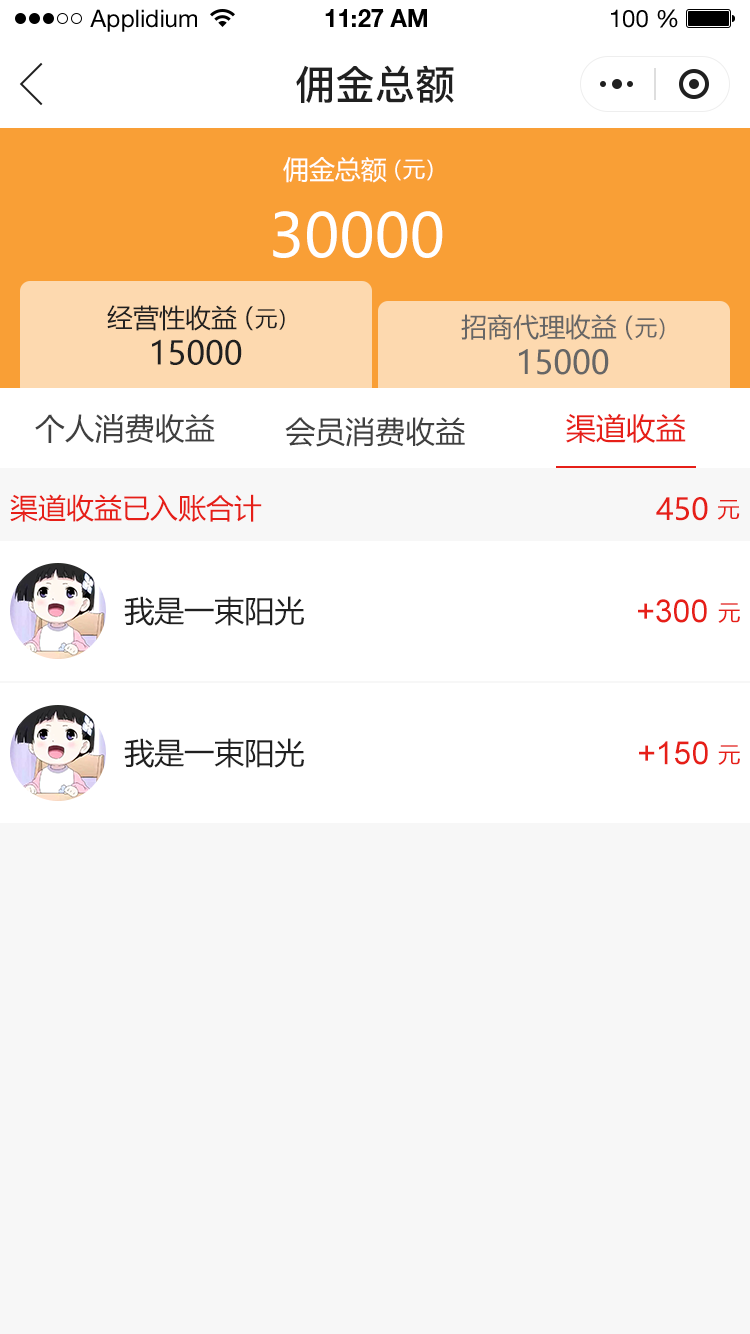
<style>
.page{position:relative;width:750px;height:1334px;background:#f7f7f7}
.page>*{position:absolute;margin:0}
.t1{font:24px "HelveticaNeueLTStd-Roman";color:#000000}
.t2{font:24px "HelveticaNeueLTStd-Bd";color:#000000}
.t3{font:40px "PingFang-SC-Bold";color:#202020;text-transform:uppercase}
.t4{font:26px "MicrosoftYaHei";color:#ffffff;text-transform:uppercase}
.t5{font:22px "MicrosoftYaHei";color:#ffffff;text-transform:uppercase}
.t6{font:60px "MicrosoftYaHei";color:#ffffff;text-transform:uppercase}
.t7{font:26px "MicrosoftYaHei";color:#202020;text-transform:uppercase}
.t8{font:22px "MicrosoftYaHei";color:#202020;text-transform:uppercase}
.t9{font:26.2px "MicrosoftYaHei";color:#666666;text-transform:uppercase}
.t10{font:22.2px "MicrosoftYaHei";color:#666666;text-transform:uppercase}
.t11{font:32px "MicrosoftYaHei";color:#202020;text-transform:uppercase}
.t12{font:32.2px "MicrosoftYaHei";color:#666666;text-transform:uppercase}
.t13{font:30px "MicrosoftYaHei";color:#404040;text-transform:uppercase}
.t14{font:30px "MicrosoftYaHei";color:#e61f18;text-transform:uppercase}
.t15{font:28px "MicrosoftYaHei";color:#e61f18;text-transform:uppercase}
.t16{font:22px "MicrosoftYaHei";color:#e61f18;text-transform:uppercase}
.t17{font:30px "MicrosoftYaHei";color:#202020;text-transform:uppercase}
.t18{font:32px "ArialMT";color:#e61f18;text-transform:uppercase}
</style>
<div class="page">
<p class="t1" style="left:90px;top:9px;width:107px;height:23px">Applidium</p>
<p class="t2" style="left:325px;top:9px;width:102px;height:18px">11:27 AM</p>
<p class="t1" style="left:611px;top:9px;width:67px;height:19px">100 %</p>
<p class="t3" style="left:296px;top:65px;width:158px;height:38px">佣金总额</p>
<p class="t4" style="left:283px;top:157px;width:104px;height:26px">佣金总额</p>
<p class="t5" style="left:395px;top:159px;width:38px;height:22px">（元）</p>
<p class="t6" style="left:273px;top:211px;width:170px;height:47px">30000</p>
<p class="t7" style="left:107px;top:305px;width:130px;height:26px">经营性收益</p>
<p class="t8" style="left:246px;top:306px;width:39px;height:25px"><span class="t7">（</span>元）</p>
<p class="t9" style="left:461px;top:314px;width:156px;height:26px">招商代理收益</p>
<p class="t10" style="left:626px;top:315px;width:39px;height:25px"><span class="t9">（</span>元）</p>
<p class="t11" style="left:152px;top:339px;width:90px;height:26px">15000</p>
<p class="t12" style="left:519px;top:349px;width:90px;height:26px">15000</p>
<p class="t13" style="left:35px;top:414px;width:180px;height:29px">个人消费收益</p>
<p class="t14" style="left:566px;top:413px;width:120px;height:30px">渠道收益</p>
<p class="t13" style="left:285px;top:417px;width:180px;height:30px">会员消费收益</p>
<p class="t15" style="left:10px;top:494px;width:252px;height:28px">渠道收益已入账合计</p>
<p class="t14" style="left:656px;top:497px;width:52px;height:24px">450</p>
<p class="t16" style="left:717px;top:500px;width:23px;height:20px">元</p>
<p class="t17" style="left:124px;top:596px;width:180px;height:30px">我是一束阳光</p>
<p class="t18" style="left:638px;top:599px;width:69px;height:24px">+300</p>
<p class="t16" style="left:718px;top:603px;width:22px;height:20px">元</p>
<p class="t17" style="left:124px;top:738px;width:180px;height:30px">我是一束阳光</p>
<p class="t18" style="left:639px;top:741px;width:69px;height:24px">+150</p>
<p class="t16" style="left:718px;top:745px;width:22px;height:20px">元</p>
</div>
